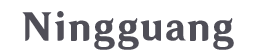
<style>
.page{position:relative;width:256px;height:56px;background:#ffffff}
.page>*{position:absolute;margin:0}
.t1{font:36px "HYWenHei-HEW";color:#4f4e57}
</style>
<div class="page">
<p class="t1" style="left:22px;top:11px;width:212px;height:39px">Ningguang</p>
</div>
